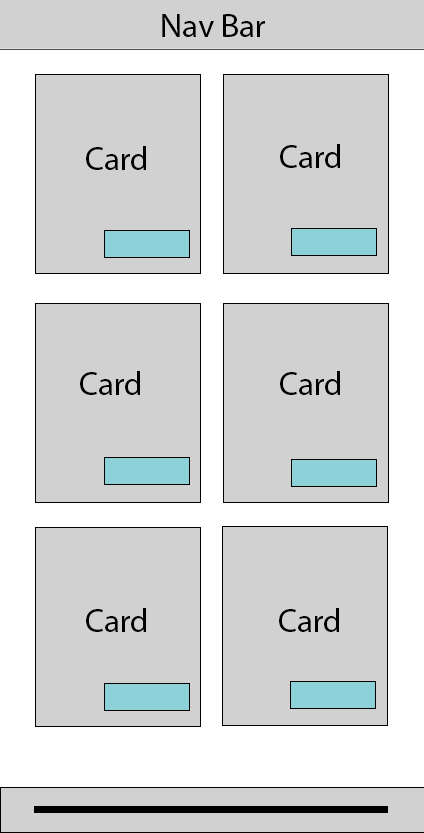
<style>
.page{position:relative;width:424px;height:833px;background:#d2d1d1}
.page>*{position:absolute;margin:0}
.t1{font:33.3px "MyriadPro-Regular";color:#000000}
</style>
<div class="page">
<p class="t1" style="left:162px;top:14px;width:103px;height:23px">Nav Bar</p>
<p class="t1" style="left:86px;top:146px;width:60px;height:24px">Card</p>
<p class="t1" style="left:280px;top:144px;width:60px;height:24px">Card</p>
<p class="t1" style="left:80px;top:371px;width:60px;height:24px">Card</p>
<p class="t1" style="left:280px;top:371px;width:60px;height:24px">Card</p>
<p class="t1" style="left:86px;top:608px;width:60px;height:24px">Card</p>
<p class="t1" style="left:279px;top:608px;width:60px;height:24px">Card</p>
</div>
